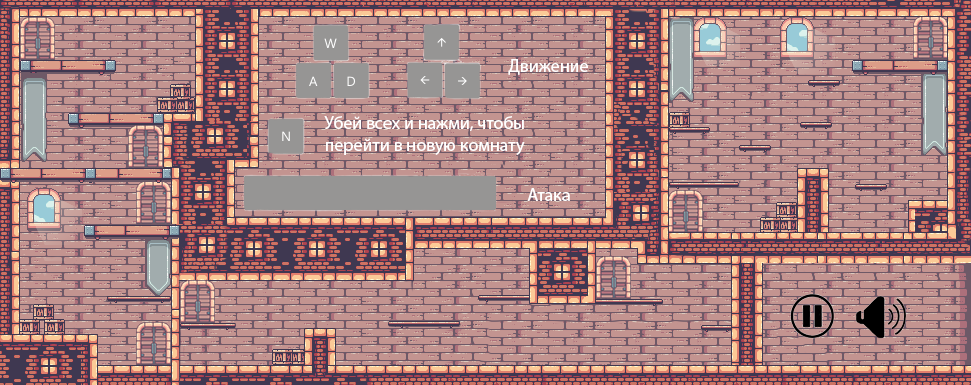
<style>
.page{position:relative;width:971px;height:385px;background:#c39490}
.page>*{position:absolute;margin:0}
.t1{font:18px "MyriadPro-Regular";color:#ffffff}
</style>
<div class="page">
<p class="t1" style="left:508px;top:59px;width:80px;height:16px">Движение</p>
<p class="t1" style="left:324px;top:116px;width:201px;height:39px">Убей всех и нажми, чтобы перейти в новую комнату</p>
<p class="t1" style="left:527px;top:188px;width:43px;height:13px">Атака</p>
</div>
